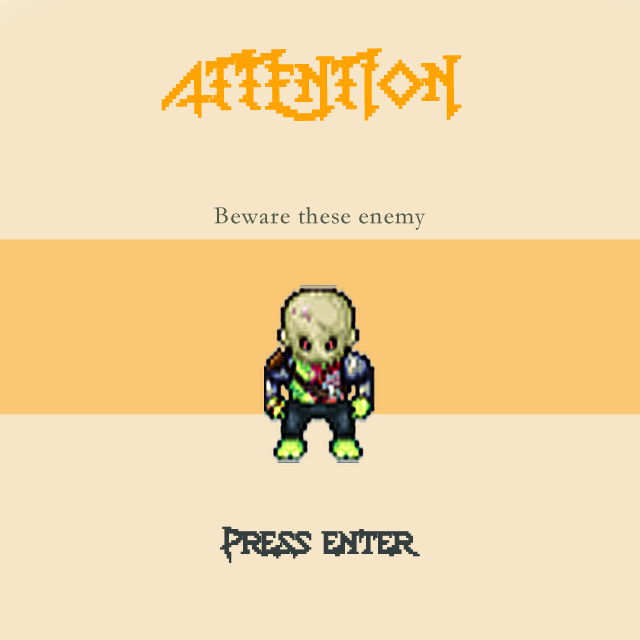
<style>
.page{position:relative;width:640px;height:640px;background:#f6e5c6}
.page>*{position:absolute;margin:0}
.t1{font:41.7px/145.5px "Lady-Radical-2";letter-spacing:0.03em;color:#ffa300;scale:0.95 1}
.t2{font:25px "Garamond";letter-spacing:0.03em;color:#515a48}
.t3{font:25px "Lady-Radical-2";letter-spacing:0.03em;color:#343e3e}
</style>
<div class="page">
<p class="t1" style="left:161px;top:48px;width:301px;height:73px">ATTENTION</p>
<p class="t2" style="left:214px;top:207px;width:212px;height:23px">Beware these enemy</p>
<p class="t3" style="left:220px;top:526px;width:200px;height:37px">Press enter</p>
</div>
